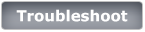
<style>
.page{position:relative;width:145px;height:32px}
.page>*{position:absolute;margin:0}
.t1{font:15px "Verdana-Bold";color:#ffffff}
</style>
<div class="page">
<p class="t1" style="left:16px;top:9px;width:112px;height:13px">Troubleshoot</p>
</div>
